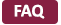
<style>
.page{position:relative;width:61px;height:25px;background:#861f41}
.page>*{position:absolute;margin:0}
.t1{font:18px "Calibri-Bold";color:#ffffff}
</style>
<div class="page">
<p class="t1" style="left:14px;top:4px;width:31px;height:15px">FAQ</p>
</div>
